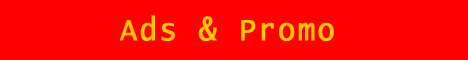
<style>
.page{position:relative;width:468px;height:60px;background:#fd0101}
.page>*{position:absolute;margin:0}
.t1{font:32px "LucidaConsole";letter-spacing:0.05em;color:#fec500;font-weight:bold;scale:0.91 1}
</style>
<div class="page">
<p class="t1" style="left:119px;top:15px;width:215px;height:26px">Ads &amp; Promo</p>
</div>
